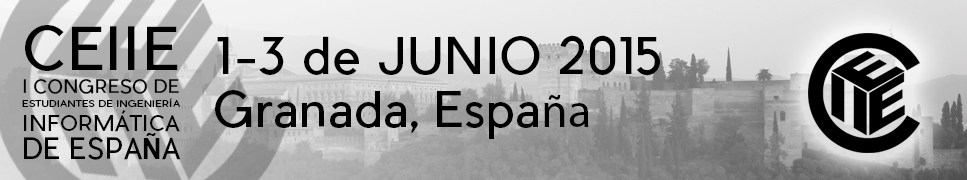
<style>
.page{position:relative;width:967px;height:180px}
.page>*{position:absolute;margin:0}
.t1{font:58.2px "PierSans-Regular";color:#000000}
.t2{font:49.5px "PierSans-Regular";color:#000000}
.t3{font:18.2px "PierSans-Regular";color:#000000}
.t4{font:8.6px "PierSans-Regular";color:#000000;scale:1.18 1}
.t5{font:48px "PierSans-Regular";color:#000000}
.t6{font:48px "MyriadPro-Regular";color:#000000}
.t7{font:21.2px "PierSans-Regular";color:#000000}
.t8{font:28.9px "PierSans-Regular";color:#000000;scale:0.93 1}
.t9{font:28.9px "Arial-BoldMT";color:#000000;scale:0.93 1}
</style>
<div class="page">
<p class="t1" style="left:25px;top:25px;width:153px;height:46px">CEIIE</p>
<p class="t2" style="left:217px;top:35px;width:443px;height:41px">1-3 de JUNIO 2015</p>
<p class="t3" style="left:23px;top:79px;width:156px;height:15px">I CONGRESO DE</p>
<p class="t4" style="left:22px;top:98px;width:159px;height:9px">ESTUDIANTES DE INGENIERÍA</p>
<p class="t5" style="left:215px;top:90px;width:374px;height:49px">Granada, Espa<span class="t6">ña</span></p>
<p class="t7" style="left:24px;top:110px;width:156px;height:22px">INFORMÁTICA</p>
<p class="t8" style="left:24px;top:133px;width:157px;height:27px">DE ESPA<span class="t9">Ñ</span>A</p>
</div>
